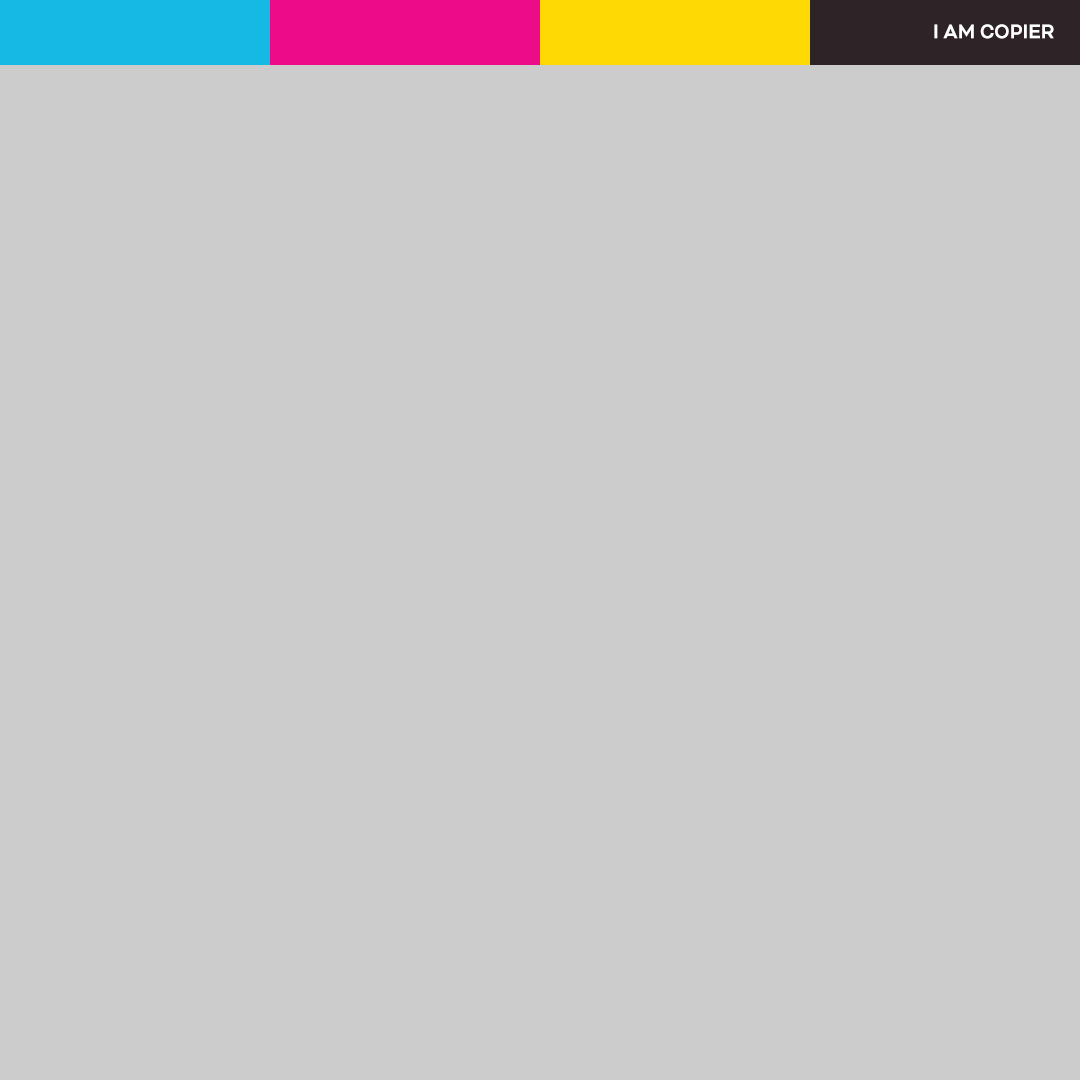
<style>
.page{position:relative;width:1080px;height:1080px;background:#cccccc}
.page>*{position:absolute;margin:0}
.t1{font:23px "Bicyclette-Bold";color:#ffffff;scale:0.9 1}
</style>
<div class="page">
<p class="t1" style="left:934px;top:24px;width:120px;height:15px">I AM COPIER</p>
</div>
